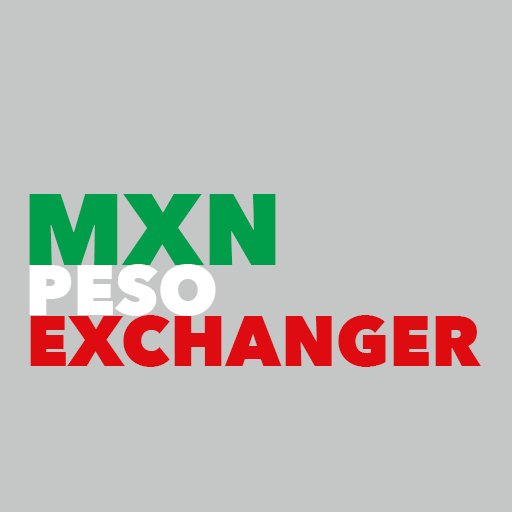
<style>
.page{position:relative;width:512px;height:512px;background:#c5c7c7}
.page>*{position:absolute;margin:0}
.t1{font:100px "AvenirNext-Heavy";color:#009d4a}
.t2{font:70px "AvenirNext-Heavy";color:#ffffff}
.t3{font:70px "AvenirNext-Heavy";color:#de0b10}
</style>
<div class="page">
<p class="t1" style="left:29px;top:194px;width:247px;height:71px">MXN</p>
<p class="t2" style="left:29px;top:264px;width:187px;height:52px">PESO</p>
<p class="t3" style="left:30px;top:315px;width:451px;height:52px">EXCHANGER</p>
</div>
